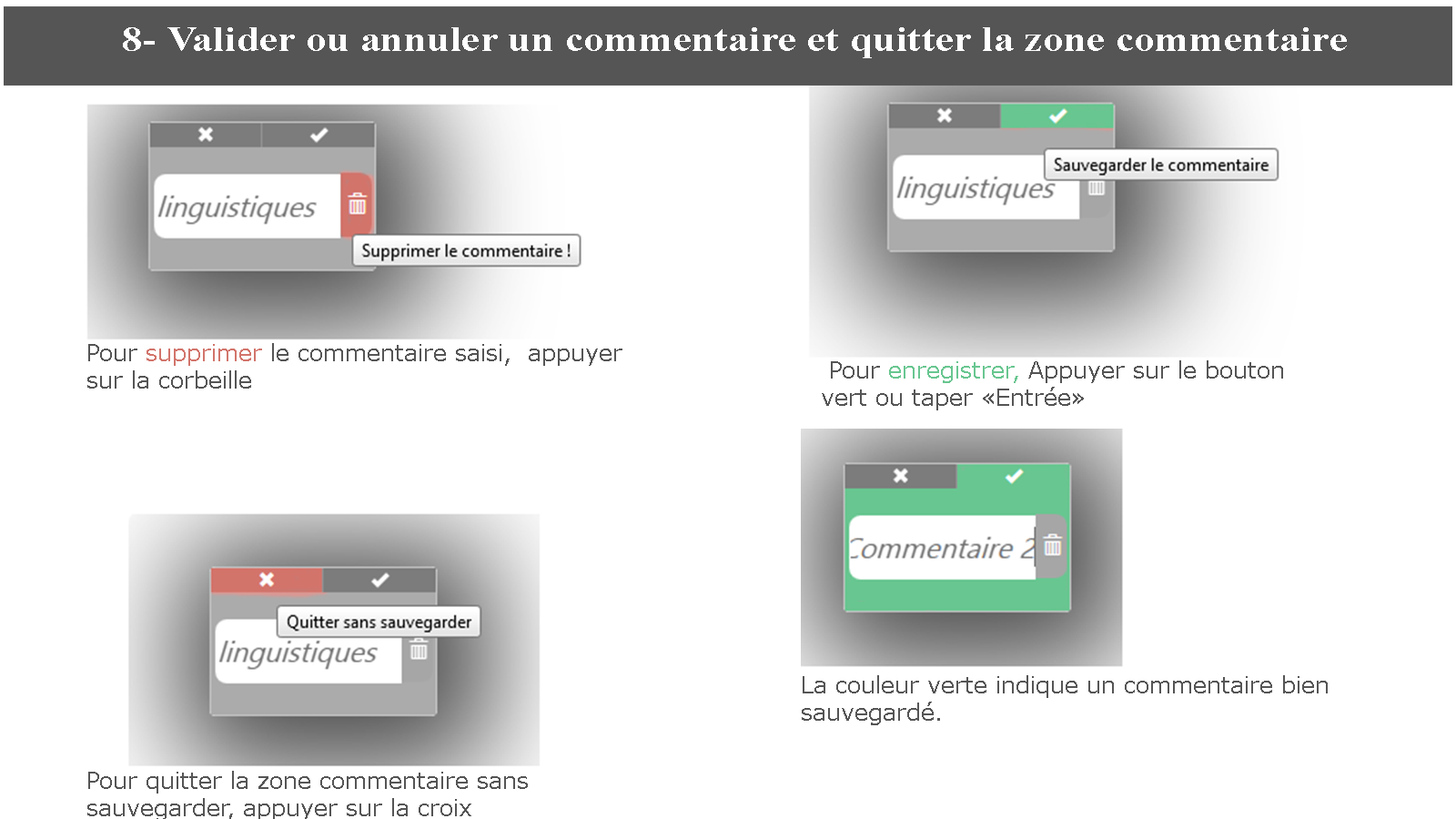
<style>
.page{position:relative;width:1456px;height:819px;background:#ffffff}
.page>*{position:absolute;margin:0}
.t1{font:34.1px "TimesNewRomanPS-BoldMT";color:#ffffff;scale:1.22 1}
.t2{font:10.9px "Verdana";color:#555555}
.t3{font:10.9px "Verdana";color:#d2746b}
.t4{font:22.7px "Verdana";color:#555555}
.t5{font:22.7px "Verdana";color:#68c690}
</style>
<div class="page">
<p class="t1" style="left:123px;top:27px;width:1224px;height:31px">8- Valider ou annuler un commentaire et quitter la zone commentaire</p>
<p class="t2" style="left:87px;top:343px;width:535px;height:46px">Pour <span class="t3">supprimer </span>le commentaire saisi,  appuyer sur la corbeille</p>
<p class="t4" style="left:822px;top:360px;width:461px;height:50px">Pour <span class="t5">enregistrer, </span>Appuyer sur le bouton vert ou taper «Entrée»</p>
<p class="t2" style="left:802px;top:675px;width:526px;height:50px">La couleur verte indique un commentaire bien sauvegardé.</p>
<p class="t2" style="left:87px;top:771px;width:441px;height:50px">Pour quitter la zone commentaire sans sauvegarder, appuyer sur la croix</p>
</div>
